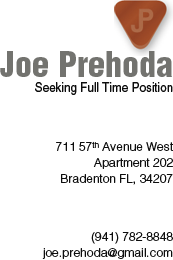
<style>
.page{position:relative;width:173px;height:260px;background:#ffffff}
.page>*{position:absolute;margin:0}
.t1{font:34px "HelveticaLTStd-BlkCond";color:#73736f}
.t2{font:13px "HelveticaLTStd-Roman";color:#0d0d0d;scale:0.9 1}
.t3{font:12px/16px "HelveticaLTStd-Light";color:#0d0d0d}
.t4{font:8px/16px "HelveticaLTStd-Light";color:#0d0d0d}
</style>
<div class="page">
<p class="t1" style="left:0px;top:51px;width:172px;height:26px">Joe Prehoda</p>
<p class="t2" style="left:35px;top:82px;width:138px;height:13px">Seeking Full Time Position</p>
<p class="t3" style="left:56px;top:141px;width:117px;height:44px;text-align:right">711 57<span class="t4">th</span> Avenue West<br>Apartment 202<br>Bradenton FL, 34207</p>
<p class="t3" style="left:42px;top:232px;width:131px;height:27px;text-align:right">(941) 782-8848<br>joe.prehoda@gmail.com</p>
</div>
